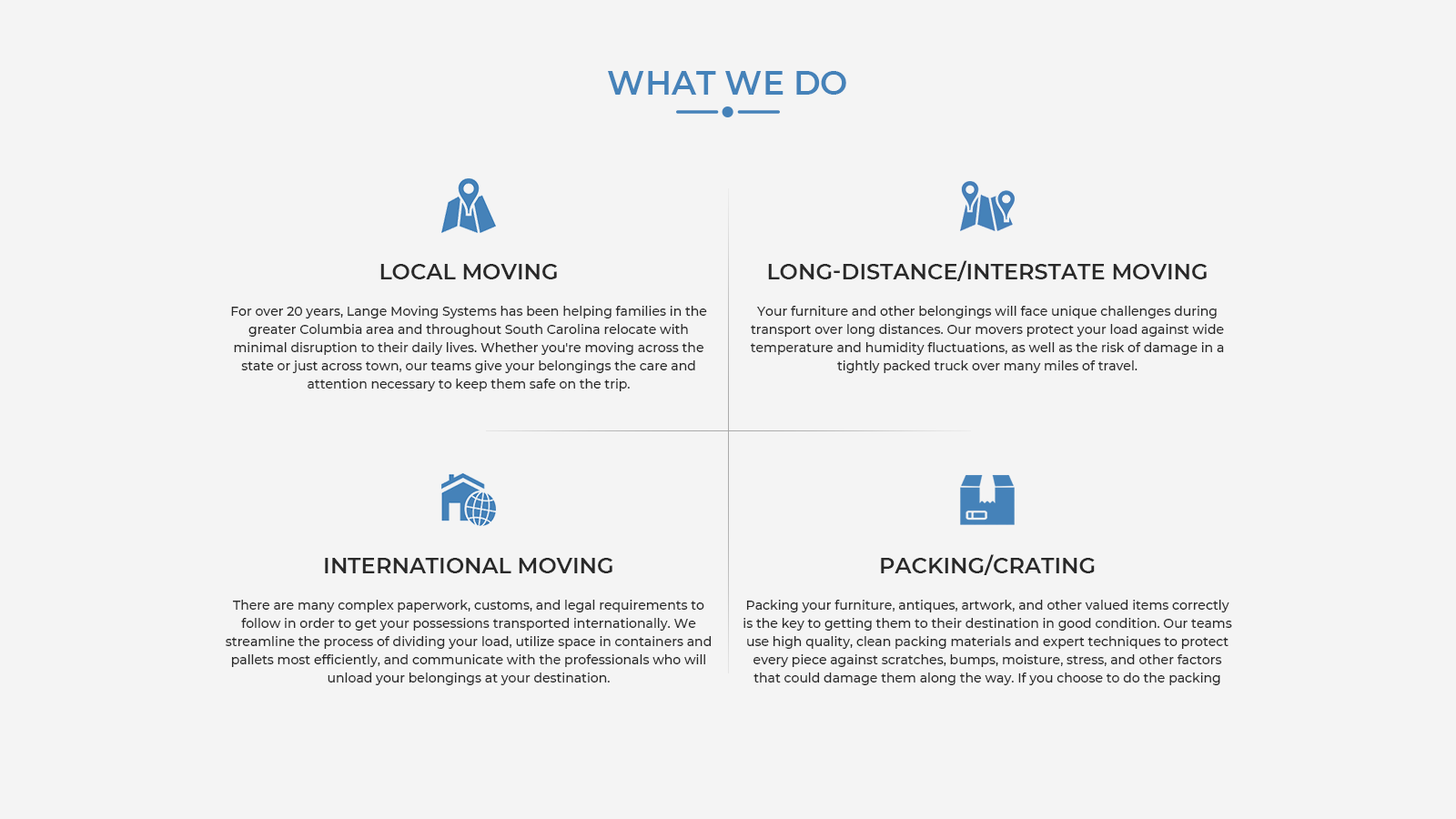
<style>
.page{position:relative;width:1456px;height:819px;background:#f4f4f4}
.page>*{position:absolute;margin:0}
.t1{font:32.8px "Montserrat-SemiBold";color:#4582b9;text-transform:uppercase}
.t2{font:21.8px "Montserrat-SemiBold";color:#292929;text-transform:uppercase}
.t3{font:12.7px/18.2px "Montserrat-Medium";color:#292929}
</style>
<div class="page">
<p class="t1" style="left:608px;top:71px;width:238px;height:24px">What We Do</p>
<p class="t2" style="left:380px;top:264px;width:177px;height:15px">Local Moving</p>
<p class="t2" style="left:768px;top:260px;width:439px;height:21px">Long-Distance/Interstate Moving</p>
<p class="t3" style="left:231px;top:306px;width:476px;height:85px;text-align:center">For over 20 years, Lange Moving Systems has been helping families in the greater Columbia area and throughout South Carolina relocate with minimal disruption to their daily lives. Whether you're moving across the state or just across town, our teams give your belongings the care and attention necessary to keep them safe on the trip.</p>
<p class="t3" style="left:750px;top:306px;width:474px;height:67px;text-align:center">Your furniture and other belongings will face unique challenges during transport over long distances. Our movers protect your load against wide temperature and humidity fluctuations, as well as the risk of damage in a tightly packed truck over many miles of travel.</p>
<p class="t2" style="left:325px;top:558px;width:287px;height:15px">International Moving</p>
<p class="t2" style="left:881px;top:554px;width:214px;height:21px">Packing/Crating</p>
<p class="t3" style="left:226px;top:600px;width:486px;height:85px;text-align:center">There are many complex paperwork, customs, and legal requirements to follow in order to get your possessions transported internationally. We streamline the process of dividing your load, utilize space in containers and pallets most efficiently, and communicate with the professionals who will unload your belongings at your destination.</p>
<p class="t3" style="left:743px;top:600px;width:489px;height:85px;text-align:center">Packing your furniture, antiques, artwork, and other valued items correctly is the key to getting them to their destination in good condition. Our teams use high quality, clean packing materials and expert techniques to protect every piece against scratches, bumps, moisture, stress, and other factors that could damage them along the way. If you choose to do the packing yourself, we remove the stress of finding materials by providing them for you.</p>
</div>
